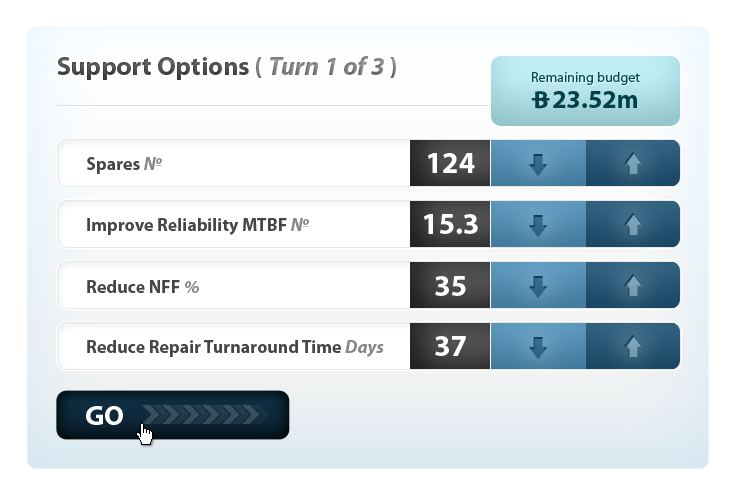
<style>
.page{position:relative;width:738px;height:498px;background:#ffffff}
.page>*{position:absolute;margin:0}
.t1{font:26px "MyriadPro-Bold";color:#464646}
.t2{font:26px "MyriadPro-Bold";color:#898989}
.t3{font:26px "MyriadPro-BoldIt";color:#898989}
.t4{font:14px "MyriadPro-Regular";color:#004f59}
.t5{font:26px "MyriadPro-Bold";color:#044047}
.t6{font:18px "MyriadPro-Bold";color:#464646}
.t7{font:18px "MyriadPro-BoldIt";color:#868686}
.t8{font:18px "MyriadPro-BoldIt";color:#868686;text-decoration:underline}
.t9{font:30px "MyriadPro-Bold";color:#ffffff}
.t10{font:28px "MyriadPro-Bold";color:#ffffff}
</style>
<div class="page">
<p class="t1" style="left:57px;top:56px;width:339px;height:24px">Support Options <span class="t2">( </span><span class="t3">Turn 1 of 3 </span><span class="t2">)</span></p>
<p class="t4" style="left:532px;top:72px;width:108px;height:13px">Remaining budget</p>
<p class="t5" style="left:553px;top:91px;width:84px;height:17px">23.52m</p>
<p class="t6" style="left:87px;top:157px;width:75px;height:17px">Spares <span class="t7">N</span><span class="t8">o</span></p>
<p class="t9" style="left:428px;top:153px;width:47px;height:20px">124</p>
<p class="t6" style="left:87px;top:218px;width:222px;height:17px">Improve Reliability MTBF <span class="t7">N</span><span class="t8">o</span></p>
<p class="t9" style="left:424px;top:214px;width:54px;height:20px">15.3</p>
<p class="t6" style="left:87px;top:280px;width:112px;height:13px">Reduce NFF <span class="t7">%</span></p>
<p class="t9" style="left:435px;top:276px;width:31px;height:20px">35</p>
<p class="t6" style="left:87px;top:340px;width:297px;height:17px">Reduce Repair Turnaround Time <span class="t7">Days</span></p>
<p class="t9" style="left:435px;top:336px;width:31px;height:20px">37</p>
<p class="t10" style="left:86px;top:406px;width:37px;height:19px">GO</p>
</div>
